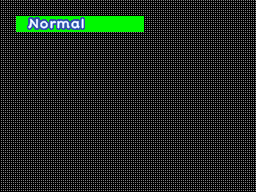
<style>
.page{position:relative;width:256px;height:192px;background:#000000}
.page>*{position:absolute;margin:0}
.t1{font:16.5px "DFLeiShoStd-W5";letter-spacing:0.075em;color:#ffffff}
</style>
<div class="page">
<p class="t1" style="left:28px;top:19px;width:56px;height:9px">Normal</p>
</div>
